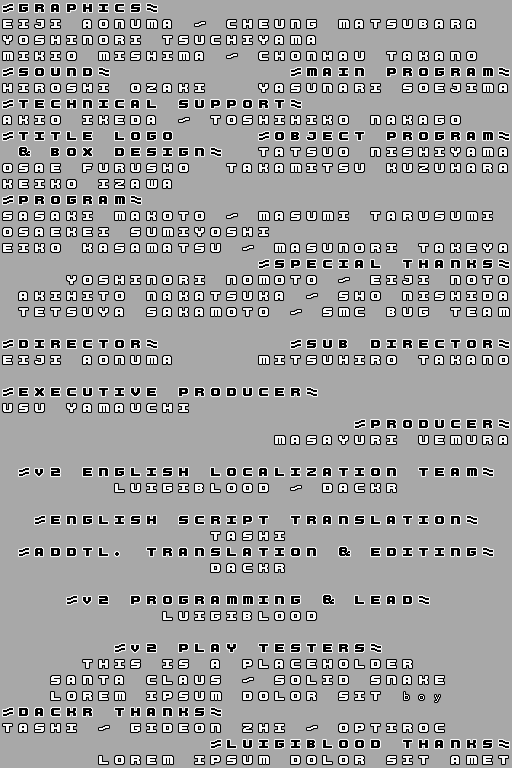
<style>
.page{position:relative;width:512px;height:768px;background:#a8a8a8}
.page>*{position:absolute;margin:0}
.t1{font:16px/16px "MarvelousCredits";color:#000000}
.t2{font:16px/16px "MarvelousCredits";color:#f8f8f8}
</style>
<div class="page">
<p class="t1" style="left:3px;top:4px;width:506px;height:744px">=GRAPHICS_<br><br><br><br>=SOUND_           =MAIN PROGRAM_<br><br>=TECHNICAL SUPPORT_<br><br>=TITLE LOGO     =OBJECT PROGRAM_<br> &amp; BOX DESIGN_<br><br><br>=PROGRAM_<br><br><br><br>                =SPECIAL THANKS_<br><br><br><br><br>=DIRECTOR_        =SUB DIRECTOR_<br><br><br>=EXECUTIVE PRODUCER_<br><br>                      =PRODUCER_  <br><br><br> =v2 ENGLISH LOCALIZATION TEAM_<br><br><br>  =ENGLISH SCRIPT TRANSLATION_<br>     <br> =ADDTL. TRANSLATION &amp; EDITING_<br><br><br>    =v2 PROGRAMMING &amp; LEAD_<br><br>                      <br>       =v2 PLAY TESTERS_        <br><br><br><br>=DACKR THANKS_<br><br>             =LUIGIBLOOD THANKS_</p>
<p class="t2" style="left:3px;top:20px;width:506px;height:744px">EIJI AONUMA - CHEUNG MATSUBARA<br>YOSHINORI TSUCHIYAMA<br>MIKIO MISHIMA - CHONHAU TAKANO<br><br>HIROSHI OZAKI   YASUNARI SOEJIMA<br><br>AKIO IKEDA - TOSHIHIKO NAKAGO<br><br>                TATSUO NISHIYAMA<br>OSAE FURUSHO  TAKAMITSU KUZUHARA<br>KEIKO IZAWA<br><br>SASAKI MAKOTO - MASUMI TARUSUMI<br>OSAEKEI SUMIYOSHI<br>EIKO KASAMATSU - MASUNORI TAKEYA<br><br>    YOSHINORI NOMOTO - EIJI NOTO<br> AKIHITO NAKATSUKA - SHO NISHIDA<br> TETSUYA SAKAMOTO - SMC BUG TEAM<br><br><br>EIJI AONUMA     MITSUHIRO TAKANO<br><br><br>USU YAMAUCHI<br>     <br>                 MASAYURI UEMURA<br><br><br>       LUIGIBLOOD - DACKR<br><br><br>             TASHI<br><br>             DACKR<br><br><br>          LUIGIBLOOD<br><br><br>     THIS IS A PLACEHOLDER<br>   SANTA CLAUS - SOLID SNAKE<br>   LOREM IPSUM DOLOR SIT boy<br><br>TASHI - GIDEON ZHI - OPTIROC <br><br>      LOREM IPSUM DOLOR SIT AMET</p>
</div>
